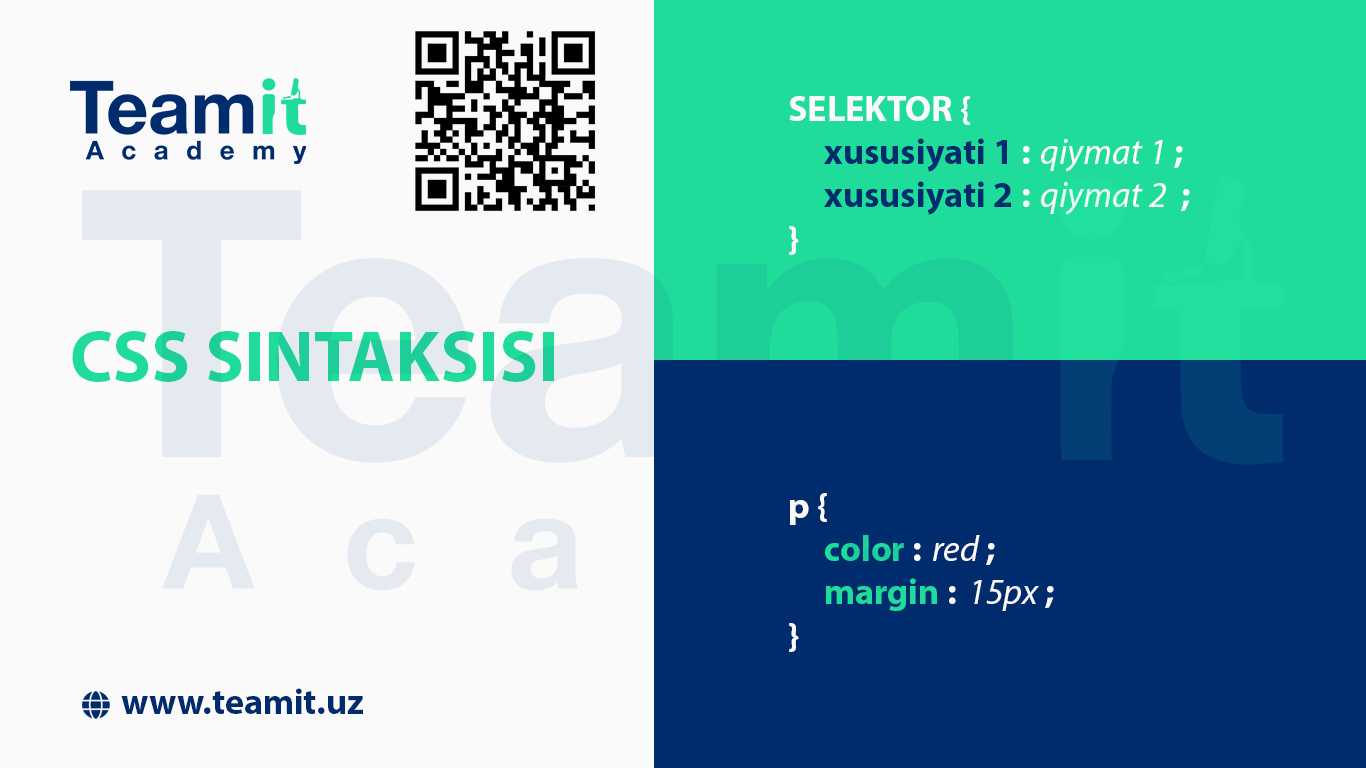
<style>
.page{position:relative;width:1366px;height:768px;background:#fafafa}
.page>*{position:absolute;margin:0}
.t1{font:36px "MyriadPro-Bold";color:#002d70}
.t2{font:36px "MyriadPro-Bold";color:#ffffff}
.t3{font:36px "MyriadPro-It";color:#ffffff}
.t4{font:72px "MyriadPro-Bold";color:#21e09d}
.t5{font:36px "MyriadPro-Bold";color:#21e09d}
</style>
<div class="page">
<p class="t1" style="left:789px;top:96px;width:401px;height:159px"><span class="t2">SELEKTOR {<br> </span>xususiyati 1 <span class="t2">: </span><span class="t3">qiymat 1 </span><span class="t2">;<br> </span>xususiyati 2 <span class="t2">: </span><span class="t3">qiymat 2  </span><span class="t2">;<br>}</span></p>
<p class="t4" style="left:72px;top:331px;width:482px;height:51px">CSS SINTAKSISI</p>
<p class="t5" style="left:789px;top:493px;width:265px;height:159px"><span class="t2">p {<br> </span>color <span class="t2">: </span><span class="t3">red </span><span class="t2">;<br> </span>margin <span class="t2">: </span><span class="t3">15px </span><span class="t2">;<br>}</span></p>
<p class="t1" style="left:121px;top:688px;width:242px;height:26px">www.teamit.uz</p>
</div>
